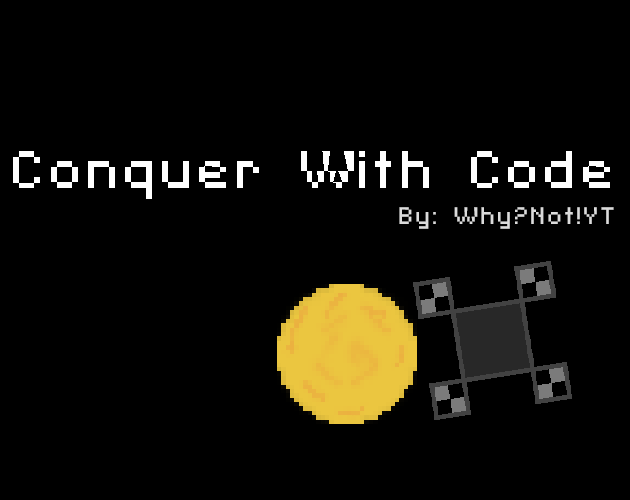
<style>
.page{position:relative;width:630px;height:500px;background:#000000}
.page>*{position:absolute;margin:0}
.t1{font:53.2px "SFPixelate";color:#ffffff}
.t2{font:24px "SFPixelate";color:#dbdbdb}
</style>
<div class="page">
<p class="t1" style="left:13px;top:151px;width:597px;height:48px">Conquer With Code</p>
<p class="t2" style="left:399px;top:207px;width:215px;height:22px">By: Why?Not!YT</p>
</div>
